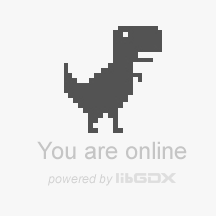
<style>
.page{position:relative;width:216px;height:216px;background:#f7f7f7}
.page>*{position:absolute;margin:0}
.t1{font:24px "ArialMT";color:#c5c5c5}
.t2{font:12px "Arial-ItalicMT";color:#d1d1d1}
</style>
<div class="page">
<p class="t1" style="left:37px;top:141px;width:150px;height:19px">You are online</p>
<p class="t2" style="left:48px;top:174px;width:65px;height:12px">powered by</p>
</div>
